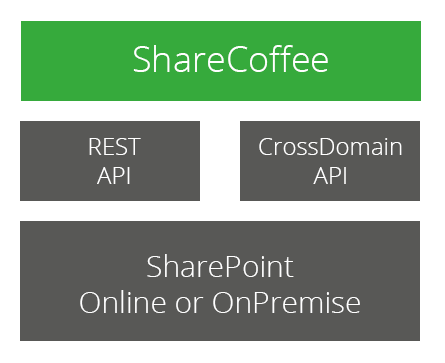
<style>
.page{position:relative;width:445px;height:363px;background:#585856}
.page>*{position:absolute;margin:0}
.t1{font:36px "OpenSans-Light";color:#ffffff}
.t2{font:24px "OpenSans-Light";color:#ffffff}
.t3{font:30px "OpenSans-Light";color:#ffffff}
</style>
<div class="page">
<p class="t1" style="left:133px;top:45px;width:195px;height:27px">ShareCoffee</p>
<p class="t2" style="left:89px;top:138px;width:52px;height:46px;text-align:center">REST<br>API</p>
<p class="t2" style="left:259px;top:138px;width:143px;height:46px;text-align:center">CrossDomain<br>API</p>
<p class="t3" style="left:80px;top:254px;width:280px;height:59px;text-align:center">SharePoint<br>Online or OnPremise</p>
</div>
